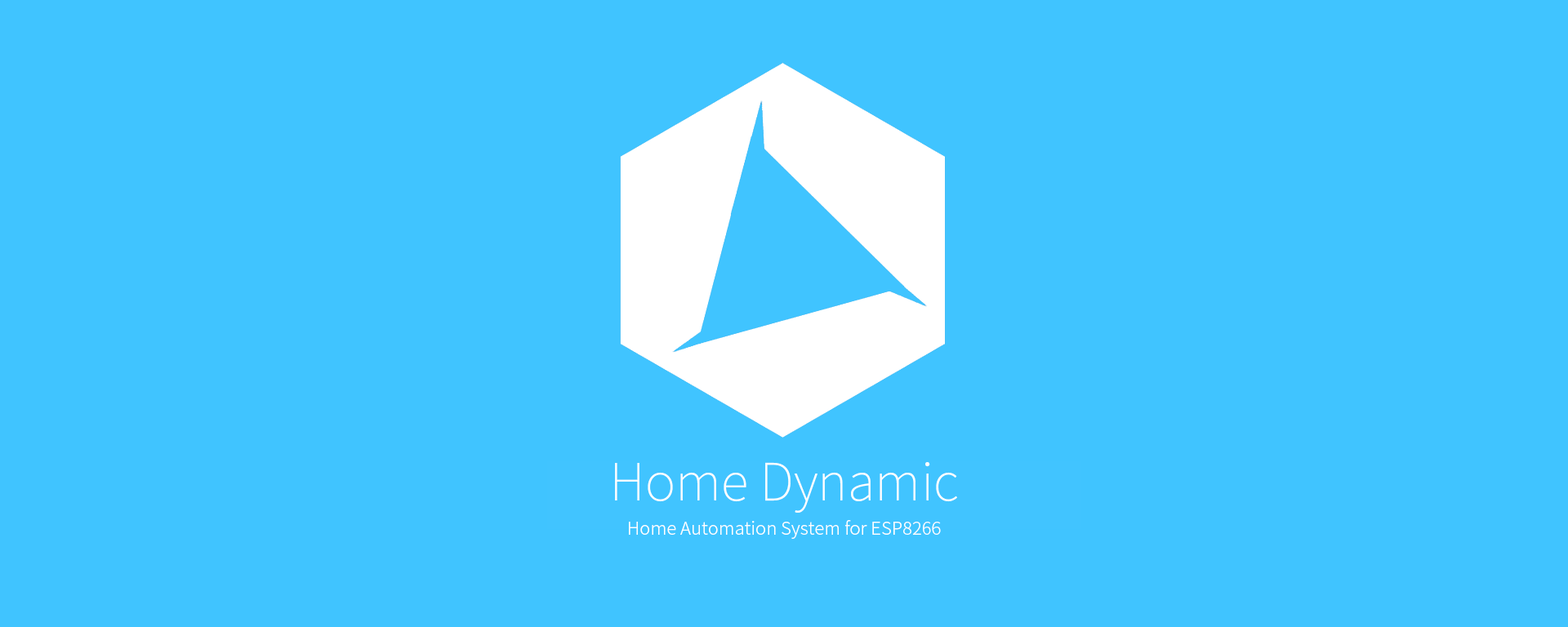
<style>
.page{position:relative;width:1568px;height:627px;background:#40c4ff}
.page>*{position:absolute;margin:0}
.t1{font:51.5px "NotoSansCJKtc-Thin";color:#ffffff}
.t2{font:18px "NotoSansCJKtc-Light";color:#ffffff}
</style>
<div class="page">
<p class="t1" style="left:615px;top:462px;width:342px;height:51px">Home Dynamic</p>
<p class="t2" style="left:629px;top:520px;width:312px;height:19px">Home Automation System for ESP8266</p>
</div>
